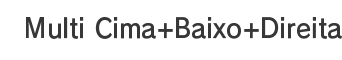
<style>
.page{position:relative;width:342px;height:60px;background:#ffffff}
.page>*{position:absolute;margin:0}
.t1{font:26.7px "RodinPro-DB";letter-spacing:0.008em;color:#383738;scale:0.93 1}
</style>
<div class="page">
<p class="t1" style="left:26px;top:17px;width:316px;height:22px">Multi Cima+Baixo+Direita</p>
</div>
